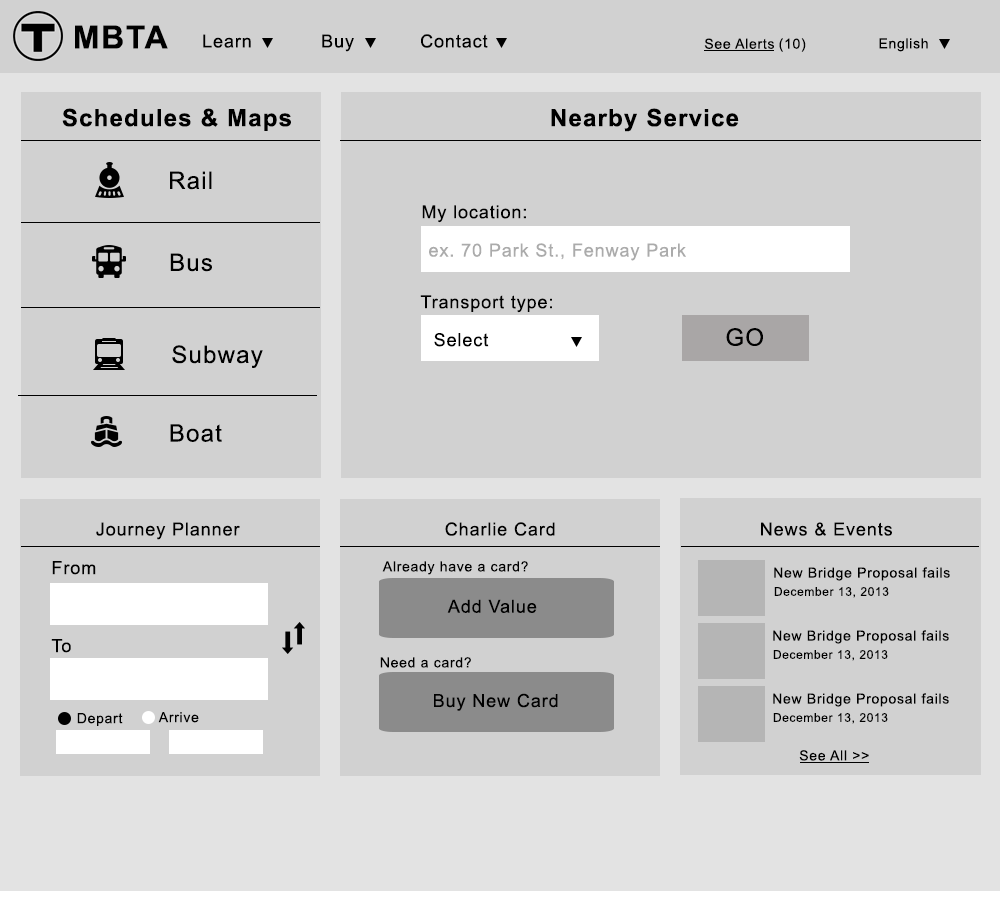
<style>
.page{position:relative;width:1000px;height:900px;background:#d1d1d1}
.page>*{position:absolute;margin:0}
.t1{font:32px "Arial-BoldMT";letter-spacing:0.05em;color:#000000}
.t2{font:18px "ArialMT";letter-spacing:0.05em;color:#000000}
.t3{font:14px "ArialMT";letter-spacing:0.05em;color:#000000}
.t4{font:24px "Arial-BoldMT";letter-spacing:0.05em;color:#000000}
.t5{font:24px "ArialMT";letter-spacing:0.05em;color:#000000}
.t6{font:18px "ArialMT";letter-spacing:0.05em;color:#ababab}
.t7{font:12px "ArialMT";letter-spacing:0.05em;color:#000000}
</style>
<div class="page">
<p class="t1" style="left:75px;top:25px;width:93px;height:24px">MBTA</p>
<p class="t2" style="left:203px;top:34px;width:48px;height:14px">Learn</p>
<p class="t2" style="left:322px;top:34px;width:32px;height:18px">Buy</p>
<p class="t2" style="left:421px;top:34px;width:67px;height:14px">Contact</p>
<p class="t3" style="left:704px;top:38px;width:70px;height:11px">See Alerts</p>
<p class="t3" style="left:779px;top:38px;width:27px;height:14px">(10)</p>
<p class="t3" style="left:879px;top:38px;width:49px;height:14px">English</p>
<p class="t4" style="left:62px;top:108px;width:229px;height:23px">Schedules &amp; Maps</p>
<p class="t4" style="left:551px;top:108px;width:188px;height:24px">Nearby Service</p>
<p class="t5" style="left:170px;top:171px;width:42px;height:19px">Rail</p>
<p class="t2" style="left:422px;top:205px;width:104px;height:18px">My location:</p>
<p class="t6" style="left:429px;top:243px;width:257px;height:18px">ex. 70 Park St., Fenway Park</p>
<p class="t5" style="left:170px;top:253px;width:42px;height:19px">Bus</p>
<p class="t2" style="left:420px;top:295px;width:132px;height:18px">Transport type:</p>
<p class="t5" style="left:726px;top:328px;width:37px;height:18px">GO</p>
<p class="t2" style="left:434px;top:333px;width:55px;height:14px">Select</p>
<p class="t5" style="left:172px;top:345px;width:91px;height:23px">Subway</p>
<p class="t5" style="left:170px;top:424px;width:52px;height:18px">Boat</p>
<p class="t2" style="left:96px;top:522px;width:144px;height:18px">Journey Planner</p>
<p class="t2" style="left:445px;top:522px;width:110px;height:14px">Charlie Card</p>
<p class="t2" style="left:761px;top:522px;width:131px;height:14px">News &amp; Events</p>
<p class="t2" style="left:52px;top:561px;width:44px;height:14px">From</p>
<p class="t3" style="left:382px;top:561px;width:146px;height:14px">Already have a card?</p>
<p class="t3" style="left:774px;top:567px;width:176px;height:14px">New Bridge Proposal fails</p>
<p class="t7" style="left:774px;top:587px;width:115px;height:11px">December 13, 2013</p>
<p class="t2" style="left:447px;top:599px;width:90px;height:14px">Add Value</p>
<p class="t3" style="left:773px;top:630px;width:176px;height:14px">New Bridge Proposal fails</p>
<p class="t2" style="left:51px;top:639px;width:20px;height:14px">To</p>
<p class="t7" style="left:773px;top:650px;width:115px;height:11px">December 13, 2013</p>
<p class="t3" style="left:380px;top:657px;width:91px;height:11px">Need a card?</p>
<p class="t2" style="left:434px;top:693px;width:124px;height:18px">Buy New Card</p>
<p class="t3" style="left:773px;top:693px;width:176px;height:14px">New Bridge Proposal fails</p>
<p class="t3" style="left:77px;top:713px;width:46px;height:13px">Depart</p>
<p class="t3" style="left:158px;top:712px;width:41px;height:11px">Arrive</p>
<p class="t7" style="left:773px;top:713px;width:115px;height:11px">December 13, 2013</p>
<p class="t3" style="left:799px;top:750px;width:70px;height:11px">See All &gt;&gt;</p>
</div>
